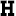
<style>
.page{position:relative;width:16px;height:16px;background:#000000}
.page>*{position:absolute;margin:0}
.t1{font:22px "Homestead";color:#000000}
</style>
<div class="page">
<p class="t1" style="left:0px;top:0px;width:15px;height:16px">H</p>
</div>
